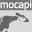
<style>
.page{position:relative;width:32px;height:32px;background:#dadada}
.page>*{position:absolute;margin:0}
.t1{font:10.1px "Tahoma";color:#ffffff}
</style>
<div class="page">
<p class="t1" style="left:0px;top:0px;width:32px;height:11px">mocapi</p>
</div>
